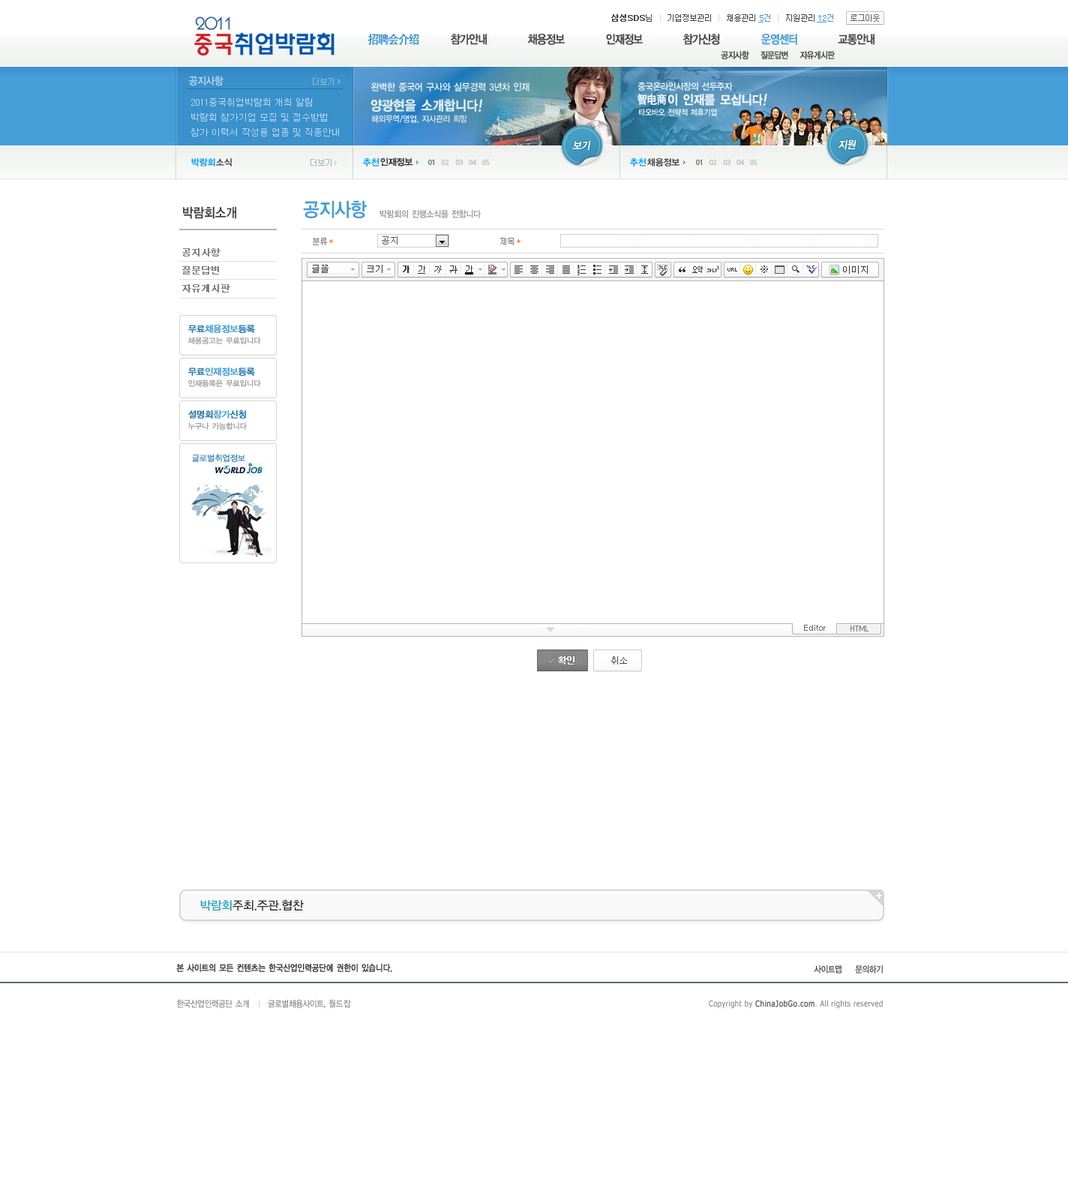
<style>
.page{position:relative;width:1068px;height:1200px;background:#ffffff}
.page>*{position:absolute;margin:0}
.t1{font:8.2px "Dotum";letter-spacing:-0.1em;color:#464646}
.t2{font:8.2px "Dotum";letter-spacing:-0.1em;color:#464646;font-weight:bold}
.t3{font:8.2px "Dotum";letter-spacing:-0.1em;color:#d6d6d6}
.t4{font:8.2px "Dotum";letter-spacing:-0.1em;color:#666666}
.t5{font:8.2px "Dotum";color:#4298d5;text-decoration:underline}
.t6{font:8.2px "Dotum";color:#4298d5}
.t7{font:12px "SimHei";letter-spacing:-0.08em;color:#3e95cf;font-weight:bold;scale:0.9 1}
.t8{font:12px "YDIYGO130-KSCpc-EUC-H";letter-spacing:-0.14em;color:#4a4a4a;font-weight:bold;scale:0.86 1}
.t9{font:12px "YDIYGO130-KSCpc-EUC-H";letter-spacing:-0.14em;color:#469ed9;font-weight:bold;scale:0.86 1}
.t10{font:9px "YDIYGO130-KSCpc-EUC-H";letter-spacing:-0.14em;color:#4a4a4a;font-weight:bold;scale:0.86 1}
.t11{font:10.5px "YDIYGO140-KSCpc-EUC-H";letter-spacing:-0.1em;color:#b9d7ef;scale:0.9 1}
.t12{font:9.9px "YDIYGO140-KSCpc-EUC-H";letter-spacing:-0.1em;color:#e4eef4;scale:0.9 1}
.t13{font:9.3px "YDIYGO140-KSCpc-EUC-H";letter-spacing:-0.1em;color:#f0f5f8;scale:0.9 1}
.t14{font:9px/15px "Dotum";color:#b9d7ef}
.t15{font:13.6px "YDIYGO140-KSCpc-EUC-H";letter-spacing:-0.1em;color:#e4eef4;font-weight:bold;scale:0.9 1}
.t16{font:13.6px "YDIYGO140-KSCpc-EUC-H";letter-spacing:-0.1em;color:#e4eef4;font-weight:bold;font-style:italic;scale:0.9 1}
.t17{font:11.7px "SimHei";letter-spacing:-0.1em;color:#f0f5f8;font-weight:bold;scale:0.9 1}
.t18{font:12.8px "YDIYGO140-KSCpc-EUC-H";letter-spacing:-0.1em;color:#f0f5f8;font-weight:bold;scale:0.9 1}
.t19{font:12.8px "YDIYGO140-KSCpc-EUC-H";letter-spacing:-0.1em;color:#f0f5f8;font-weight:bold;font-style:italic;scale:0.9 1}
.t20{font:8.2px "YDIYGO140-KSCpc-EUC-H";letter-spacing:-0.1em;color:#f0f5f8;scale:0.9 1}
.t21{font:8.7px "YDIYGO140-KSCpc-EUC-H";letter-spacing:-0.1em;color:#dde8ef;scale:0.9 1}
.t22{font:10.5px "YDIYGO130-KSCpc-EUC-H";letter-spacing:-0.1em;color:#ffffff;font-weight:bold;font-style:italic;scale:0.9 1}
.t23{font:9px "YDIYGO140-KSCpc-EUC-H";letter-spacing:-0.1em;color:#0099ff}
.t24{font:9px "YDIYGO140-KSCpc-EUC-H";letter-spacing:-0.1em;color:#3e3e3e}
.t25{font:13.5px "YDIYGO140-KSCpc-EUC-H";letter-spacing:-0.1em;color:#454545;scale:0.9 1}
.t26{font:19.5px "YDIYGO140-KSCpc-EUC-H";letter-spacing:-0.1em;color:#469ed9;scale:0.9 1}
.t27{font:9px "YDIYGO140-KSCpc-EUC-H";letter-spacing:-0.1em;color:#999999;scale:0.9 1}
.t28{font:8.2px "Dotum";letter-spacing:-0.1em;color:#7d7d7d}
.t29{font:8.2px "Dotum";letter-spacing:-0.1em;color:#ff6600}
.t30{font:9px "Dotum";color:#555555}
.t31{font:9px/18px "Dotum";color:#808080;font-weight:bold}
.t32{font:9px "YDIYGO130-KSCpc-EUC-H";letter-spacing:-0.1em;color:#469ed9;font-weight:bold}
.t33{font:9px "YDIYGO130-KSCpc-EUC-H";letter-spacing:-0.1em;color:#2476ad;font-weight:bold}
.t34{font:7.5px "YDIYGO130-KSCpc-EUC-H";letter-spacing:-0.1em;color:#a1a1a1;font-weight:bold}
.t35{font:8.2px "YDIYGO120-KSCpc-EUC-H";letter-spacing:-0.1em;color:#2f7cb1;font-weight:bold}
.t36{font:12px "YDIYGO130-KSCpc-EUC-H";letter-spacing:-0.1em;color:#323131}
.t37{font:12px "YDIYGO130-KSCpc-EUC-H";letter-spacing:-0.1em;color:#2ea2c2}
.t38{font:9px "YDIYGO130-KSCpc-EUC-H";letter-spacing:-0.1em;color:#373737;font-weight:bold;scale:0.86 1}
.t39{font:9px "YDIYGO130-KSCpc-EUC-H";letter-spacing:-0.1em;color:#373737;scale:0.86 1}
.t40{font:9px "YDIYGO130-KSCpc-EUC-H";letter-spacing:-0.1em;color:#868686;scale:0.86 1}
.t41{font:9px "YDIYGO130-KSCpc-EUC-H";letter-spacing:-0.05em;color:#868686;scale:0.86 1}
.t42{font:8.2px "Tahoma";letter-spacing:0.05em;color:#868686;scale:0.86 1}
.t43{font:8.2px "Tahoma";letter-spacing:0.05em;color:#626262;font-weight:bold;scale:0.86 1}
</style>
<div class="page">
<p class="t1" style="left:611px;top:14px;width:269px;height:8px"><span class="t2">삼성SDS</span>님   <span class="t3">| </span>  기업정보관리   <span class="t3">| </span>  채용관리          <span class="t3">|</span>   지원관리                <span class="t4">로그아웃</span></p>
<p class="t5" style="left:758px;top:14px;width:12px;height:8px">5<span class="t6">건</span></p>
<p class="t5" style="left:817px;top:14px;width:16px;height:8px">12<span class="t6">건</span></p>
<p class="t7" style="left:368px;top:33px;width:51px;height:12px">招聘会介绍</p>
<p class="t8" style="left:451px;top:34px;width:36px;height:11px">참가안내</p>
<p class="t8" style="left:527px;top:34px;width:38px;height:11px">채용정보</p>
<p class="t8" style="left:606px;top:34px;width:37px;height:11px">인재정보</p>
<p class="t8" style="left:683px;top:34px;width:37px;height:11px">참가신청</p>
<p class="t9" style="left:760px;top:34px;width:37px;height:11px">운영센터</p>
<p class="t8" style="left:838px;top:34px;width:36px;height:11px">교통안내</p>
<p class="t10" style="left:721px;top:51px;width:114px;height:9px">공지사항    질문답변    자유게시판</p>
<p class="t11" style="left:189px;top:76px;width:35px;height:10px">공지사항</p>
<p class="t12" style="left:371px;top:82px;width:159px;height:10px">완벽한 중국어 구사와 실무경력 3년차 인재</p>
<p class="t13" style="left:638px;top:82px;width:95px;height:9px">중국온라인시장의 선두주자</p>
<p class="t14" style="left:190px;top:98px;width:149px;height:38px">2011중국취업박람회 개최 알림<br>박람회 참가기업 모집 및 접수방법<br>참가 이력서 작성용 업종 및 직종안내</p>
<p class="t15" style="left:370px;top:99px;width:113px;height:13px">양광현을 소개합니다<span class="t16">!</span></p>
<p class="t17" style="left:638px;top:94px;width:29px;height:11px">智电商</p>
<p class="t18" style="left:668px;top:94px;width:99px;height:12px">이 인재를 모십니다<span class="t19">!</span></p>
<p class="t20" style="left:639px;top:108px;width:78px;height:8px">타오바오 전략적 제휴기업</p>
<p class="t21" style="left:371px;top:115px;width:96px;height:9px">해외무역/영업, 지사관리 희망</p>
<p class="t22" style="left:572px;top:140px;width:19px;height:11px">보기</p>
<p class="t22" style="left:838px;top:140px;width:18px;height:10px">지원</p>
<p class="t23" style="left:191px;top:158px;width:24px;height:8px">박람회</p>
<p class="t24" style="left:216px;top:158px;width:16px;height:8px">소식</p>
<p class="t23" style="left:363px;top:158px;width:17px;height:8px">추천</p>
<p class="t24" style="left:380px;top:158px;width:33px;height:8px">인재정보</p>
<p class="t23" style="left:630px;top:158px;width:16px;height:8px">추천</p>
<p class="t24" style="left:647px;top:158px;width:33px;height:8px">채용정보</p>
<p class="t25" style="left:183px;top:206px;width:53px;height:13px">박람회소개</p>
<p class="t26" style="left:303px;top:200px;width:64px;height:18px">공지사항</p>
<p class="t27" style="left:380px;top:210px;width:101px;height:8px">박람회의 진행소식을 전합니다</p>
<p class="t28" style="left:313px;top:238px;width:14px;height:7px">분류</p>
<p class="t29" style="left:329px;top:239px;width:4px;height:4px">*</p>
<p class="t30" style="left:382px;top:236px;width:16px;height:8px">공지</p>
<p class="t28" style="left:500px;top:238px;width:14px;height:7px">제목</p>
<p class="t29" style="left:517px;top:239px;width:3px;height:4px">*</p>
<p class="t31" style="left:182px;top:248px;width:48px;height:44px">공지사항<br>질문답변<br>자유게시판</p>
<p class="t32" style="left:188px;top:325px;width:67px;height:8px"><span class="t33">무료</span>채용정보<span class="t33">등록</span></p>
<p class="t34" style="left:188px;top:337px;width:73px;height:7px">채용공고는 무료입니다</p>
<p class="t32" style="left:188px;top:368px;width:67px;height:8px"><span class="t33">무료</span>인재정보<span class="t33">등록</span></p>
<p class="t34" style="left:188px;top:380px;width:73px;height:7px">인재등록은 무료입니다</p>
<p class="t33" style="left:188px;top:410px;width:58px;height:8px">설명회<span class="t32">참가</span>신청</p>
<p class="t34" style="left:188px;top:422px;width:59px;height:8px">누구나 가능합니다</p>
<p class="t35" style="left:192px;top:454px;width:53px;height:8px">글로벌취업정보</p>
<p class="t36" style="left:200px;top:900px;width:104px;height:11px"><span class="t37">박람회</span>주최.주관.협찬</p>
<p class="t38" style="left:176px;top:964px;width:216px;height:8px">본 사이트의 모든 컨텐츠는 한국산업인력공단에 권한이 있습니다.</p>
<p class="t39" style="left:814px;top:965px;width:28px;height:9px">사이트맵</p>
<p class="t39" style="left:855px;top:965px;width:28px;height:9px">문의하기</p>
<p class="t40" style="left:177px;top:1000px;width:174px;height:9px">한국산업인력공단 소개      글로벌채용사이트, <span class="t41">월드잡</span></p>
<p class="t42" style="left:709px;top:1000px;width:174px;height:9px">Copyright by <span class="t43">ChinaJobGo.com</span>. All rights reserved</p>
</div>
